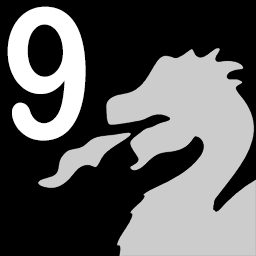
<style>
.page{position:relative;width:256px;height:256px;background:#000000}
.page>*{position:absolute;margin:0}
.t1{font:182.4px "ArialRoundedMTBold";letter-spacing:-0.4em;color:#ffffff;font-variant:small-caps;scale:0.83 1}
</style>
<div class="page">
<p class="t1" style="left:7px;top:6px;width:79px;height:135px">9</p>
</div>
